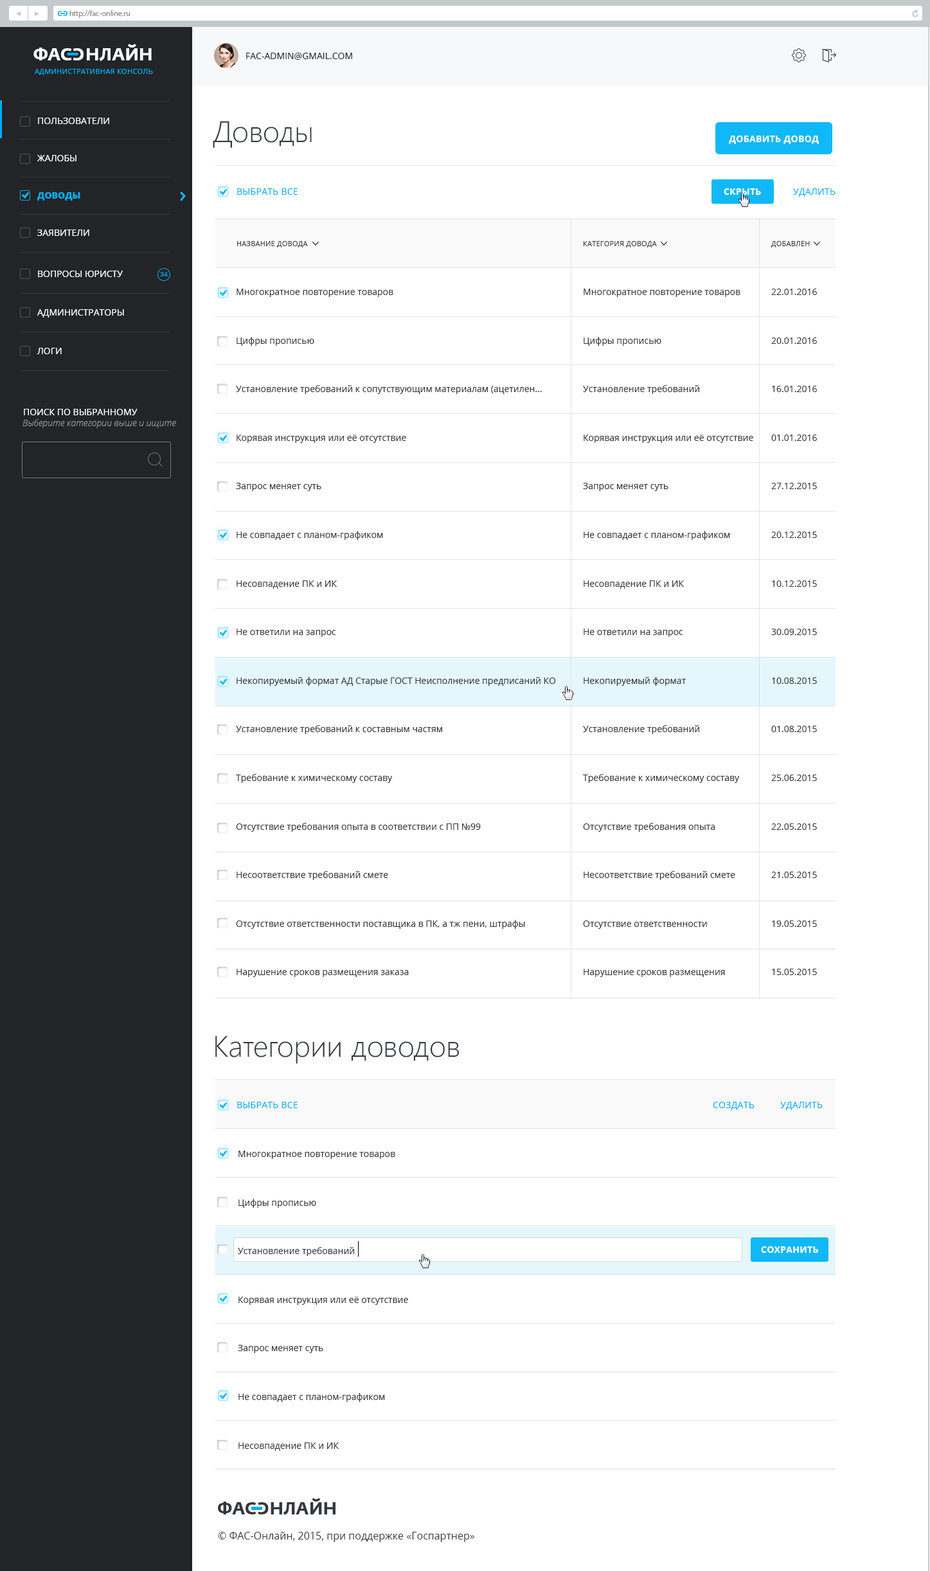
<style>
.page{position:relative;width:930px;height:1571px;background:#ffffff}
.page>*{position:absolute;margin:0}
.t1{font:6.4px "FedraSansPro-Bold";color:#00aeef;text-transform:uppercase}
.t2{font:7.7px "MyriadPro-Regular";color:#8d8d8d}
.t3{font:17.4px "FedraSansPro-Bold";color:#ffffff;text-transform:uppercase}
.t4{font:9px "OpenSans";color:#222427;text-transform:uppercase}
.t5{font:7.1px "OpenSans";letter-spacing:0.03em;color:#00aeef;text-transform:uppercase}
.t6{font:9px "OpenSans";color:#ffffff;text-transform:uppercase}
.t7{font:29.6px "SegoeUI-Light";color:#34383e}
.t8{font:9px "OpenSans-Bold";letter-spacing:0.03em;color:#fefefe;text-transform:uppercase}
.t9{font:9px "OpenSans-Extrabold";color:#00aeef;text-transform:uppercase}
.t10{font:9px "OpenSans";letter-spacing:0.02em;color:#00aeef;text-transform:uppercase}
.t11{font:9px "OpenSans-Bold";letter-spacing:0.02em;color:#ffffff;text-transform:uppercase}
.t12{font:7.1px "OpenSans";letter-spacing:0.02em;color:#34383e;text-transform:uppercase}
.t13{font:6.4px "OpenSans";color:#00aeef}
.t14{font:9px "OpenSans";color:#34383e}
.t15{font:9px "OpenSans";color:#34383e;text-transform:uppercase}
.t16{font:9px "OpenSansLight-Italic";color:#959596}
.t17{font:17.4px "FedraSansPro-Bold";color:#34383e;text-transform:uppercase}
.t18{font:10.3px "OpenSans";color:#34383e}
</style>
<div class="page">
<p class="t1" style="left:58px;top:11px;width:4px;height:5px">c</p>
<p class="t1" style="left:63px;top:11px;width:5px;height:5px;rotate:180deg">c</p>
<p class="t2" style="left:69px;top:10px;width:61px;height:8px">http://fac-online.ru</p>
<p class="t3" style="left:33px;top:44px;width:119px;height:17px">ФАc   НЛАЙН</p>
<p class="t3" style="left:73px;top:48px;width:11px;height:12px;rotate:180deg">c</p>
<p class="t4" style="left:246px;top:53px;width:106px;height:7px">FAC-Admin@gmail.com</p>
<p class="t5" style="left:35px;top:69px;width:118px;height:6px">Административная консоль</p>
<p class="t6" style="left:38px;top:118px;width:71px;height:6px">Пользователи</p>
<p class="t7" style="left:213px;top:121px;width:99px;height:27px">Доводы</p>
<p class="t8" style="left:729px;top:135px;width:90px;height:10px">добавить довод</p>
<p class="t6" style="left:37px;top:155px;width:39px;height:6px">жалобы</p>
<p class="t9" style="left:37px;top:192px;width:43px;height:9px">Доводы</p>
<p class="t10" style="left:237px;top:188px;width:61px;height:7px">Выбрать все</p>
<p class="t11" style="left:724px;top:188px;width:37px;height:7px">скрыть</p>
<p class="t10" style="left:793px;top:188px;width:43px;height:9px">Удалить</p>
<p class="t6" style="left:37px;top:230px;width:52px;height:6px">ЗАявители</p>
<p class="t12" style="left:237px;top:241px;width:71px;height:7px">Название довода</p>
<p class="t12" style="left:584px;top:241px;width:73px;height:7px">Категория довода</p>
<p class="t12" style="left:771px;top:241px;width:39px;height:7px">добавлен</p>
<p class="t6" style="left:38px;top:271px;width:85px;height:6px">вопросы юристу</p>
<p class="t13" style="left:160px;top:272px;width:8px;height:4px">34</p>
<p class="t14" style="left:236px;top:289px;width:320px;height:688px">Многократное повторение товаров<br>Цифры прописью<br>Установление требований к сопутствующим материалам (ацетилен...<br>Корявая инструкция или её отсутствие<br>Запрос меняет суть<br>Не совпадает с планом-графиком<br>Несовпадение ПК и ИК<br>Не ответили на запрос<br>Некопируемый формат АД Старые ГОСТ Неисполнение предписаний КО<br>Установление требований к составным частям<br>Требование к химическому составу<br>Отсутствие требования опыта в соответствии с ПП №99<br>Несоответствие требований смете<br>Отсутствие ответственности поставщика в ПК, а тж пени, штрафы<br>Нарушение сроков размещения заказа</p>
<p class="t14" style="left:583px;top:289px;width:170px;height:688px">Многократное повторение товаров<br>Цифры прописью<br>Установление требований <br>Корявая инструкция или её отсутствие<br>Запрос меняет суть<br>Не совпадает с планом-графиком<br>Несовпадение ПК и ИК<br>Не ответили на запрос<br>Некопируемый формат <br>Установление требований <br>Требование к химическому составу<br>Отсутствие требования опыта <br>Несоответствие требований смете<br>Отсутствие ответственности<br>Нарушение сроков размещения</p>
<p class="t15" style="left:771px;top:289px;width:46px;height:686px">22.01.2016<br>20.01.2016<br>16.01.2016<br>01.01.2016<br>27.12.2015<br>20.12.2015<br>10.12.2015<br>30.09.2015<br>10.08.2015<br>01.08.2015<br>25.06.2015<br>22.05.2015<br>21.05.2015<br>19.05.2015<br>15.05.2015</p>
<p class="t6" style="left:37px;top:309px;width:87px;height:9px">Администраторы</p>
<p class="t6" style="left:37px;top:348px;width:25px;height:6px">логи</p>
<p class="t6" style="left:24px;top:409px;width:114px;height:6px">Поиск по выбранному</p>
<p class="t16" style="left:22px;top:419px;width:154px;height:9px">Выберите категории выше и ищите</p>
<p class="t7" style="left:215px;top:1036px;width:245px;height:28px">Категории доводов</p>
<p class="t10" style="left:237px;top:1102px;width:61px;height:6px">Выбрать все</p>
<p class="t10" style="left:713px;top:1102px;width:42px;height:8px">Создать</p>
<p class="t10" style="left:780px;top:1102px;width:43px;height:8px">Удалить</p>
<p class="t14" style="left:238px;top:1151px;width:170px;height:300px">Многократное повторение товаров<br>Цифры прописью<br>Установление требований  <br>Корявая инструкция или её отсутствие<br>Запрос меняет суть<br>Не совпадает с планом-графиком<br>Несовпадение ПК и ИК</p>
<p class="t11" style="left:761px;top:1246px;width:57px;height:7px">Сохранить</p>
<p class="t17" style="left:218px;top:1498px;width:118px;height:17px">ФАc   НЛАЙН</p>
<p class="t17" style="left:258px;top:1502px;width:11px;height:13px;rotate:180deg">c</p>
<p class="t18" style="left:218px;top:1532px;width:256px;height:10px">© ФАС-Онлайн, 2015, при поддержке «Госпартнер»</p>
</div>
